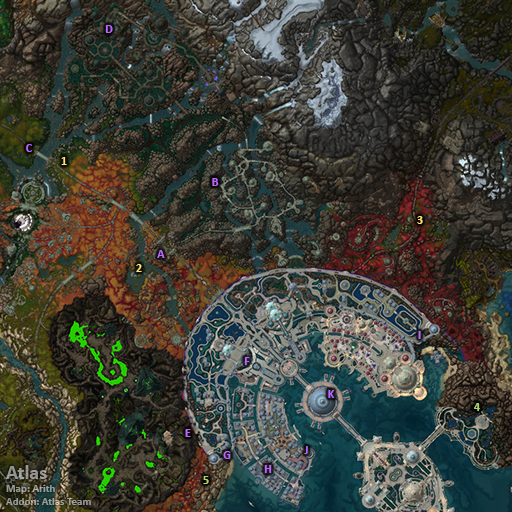
<style>
.page{position:relative;width:512px;height:512px}
.page>*{position:absolute;margin:0}
.t1{font:12px "Calibri-Bold";color:#bb66ff}
.t2{font:12px "Calibri-Bold";color:#fee570}
.t3{font:12px "Calibri-Bold";color:#abd473}
.t4{font:11px "Calibri-Bold";color:#979992}
.t5{font:20px "Calibri-Bold";color:#979992}
</style>
<div class="page">
<p class="t1" style="left:105px;top:25px;width:8px;height:8px">D</p>
<p class="t1" style="left:26px;top:144px;width:6px;height:8px">C</p>
<p class="t2" style="left:61px;top:157px;width:6px;height:8px">1</p>
<p class="t1" style="left:212px;top:178px;width:7px;height:8px">B</p>
<p class="t2" style="left:417px;top:216px;width:6px;height:8px">3</p>
<p class="t1" style="left:157px;top:250px;width:8px;height:8px">A</p>
<p class="t2" style="left:136px;top:264px;width:6px;height:8px">2</p>
<p class="t1" style="left:418px;top:331px;width:3px;height:8px">I</p>
<p class="t1" style="left:244px;top:357px;width:6px;height:8px">F</p>
<p class="t1" style="left:328px;top:390px;width:7px;height:8px">K</p>
<p class="t3" style="left:474px;top:403px;width:6px;height:8px">4</p>
<p class="t1" style="left:185px;top:429px;width:6px;height:8px">E</p>
<p class="t1" style="left:304px;top:446px;width:4px;height:8px">J</p>
<p class="t1" style="left:223px;top:451px;width:8px;height:8px">G</p>
<p class="t4" style="left:6px;top:465px;width:85px;height:40px"><span class="t5">Atlas<br></span>Map: Arith<br>Addon: Atlas Team</p>
<p class="t1" style="left:264px;top:465px;width:8px;height:8px">H</p>
<p class="t3" style="left:203px;top:476px;width:6px;height:8px">5</p>
</div>
